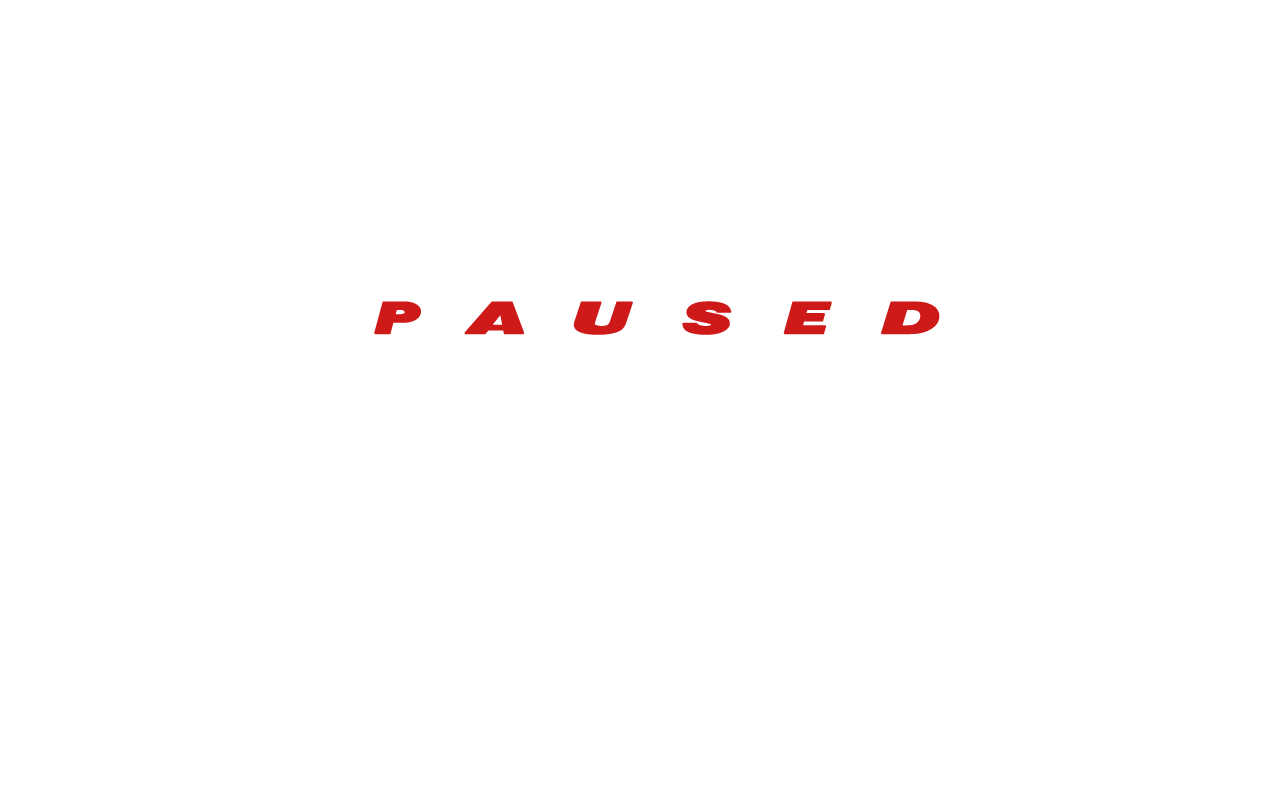
<style>
.page{position:relative;width:1280px;height:800px;background:#ffffff}
.page>*{position:absolute;margin:0}
.t1{font:60px "Tactical-Espionage-Action";letter-spacing:0.9em;color:#ce1919;text-transform:uppercase;font-weight:bold}
</style>
<div class="page">
<p class="t1" style="left:374px;top:301px;width:566px;height:34px">PAUSED</p>
</div>
